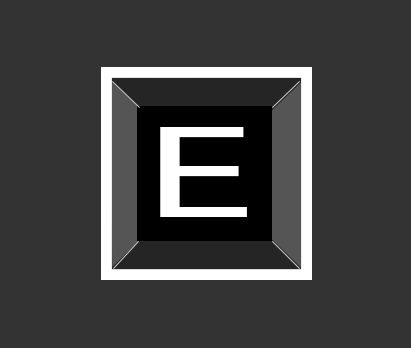
<style>
.page{position:relative;width:411px;height:348px;background:#333333}
.page>*{position:absolute;margin:0}
.t1{font:128.5px "Gadugi";color:#ffffff;scale:1.81 1}
</style>
<div class="page">
<p class="t1" style="left:160px;top:127px;width:87px;height:90px">E</p>
</div>
